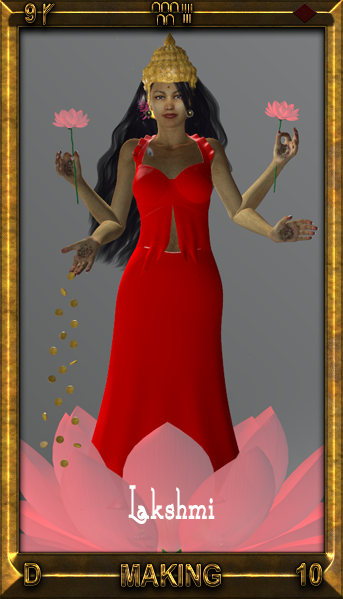
<style>
.page{position:relative;width:343px;height:599px}
.page>*{position:absolute;margin:0}
.t1{font:25.9px "Arial-BoldMT";scale:0.84 1}
.t2{font:25.9px "Geneva";scale:0.84 1}
.t3{font:53.4px "CalamityJaneNF-Bold";color:#ffffff;scale:0.61 1}
.t4{font:30px "Arial-BoldMT";scale:0.84 1}
</style>
<div class="page">
<p class="t1" style="left:25px;top:3px;width:11px;height:20px">9</p>
<p class="t2" style="left:43px;top:4px;width:12px;height:21px">ᚠ</p>
<p class="t3" style="left:128px;top:485px;width:87px;height:39px">Lakshmi</p>
<p class="t4" style="left:25px;top:563px;width:16px;height:22px">D</p>
<p class="t4" style="left:121px;top:564px;width:100px;height:23px">MAKING</p>
<p class="t4" style="left:297px;top:563px;width:25px;height:23px">10</p>
</div>
